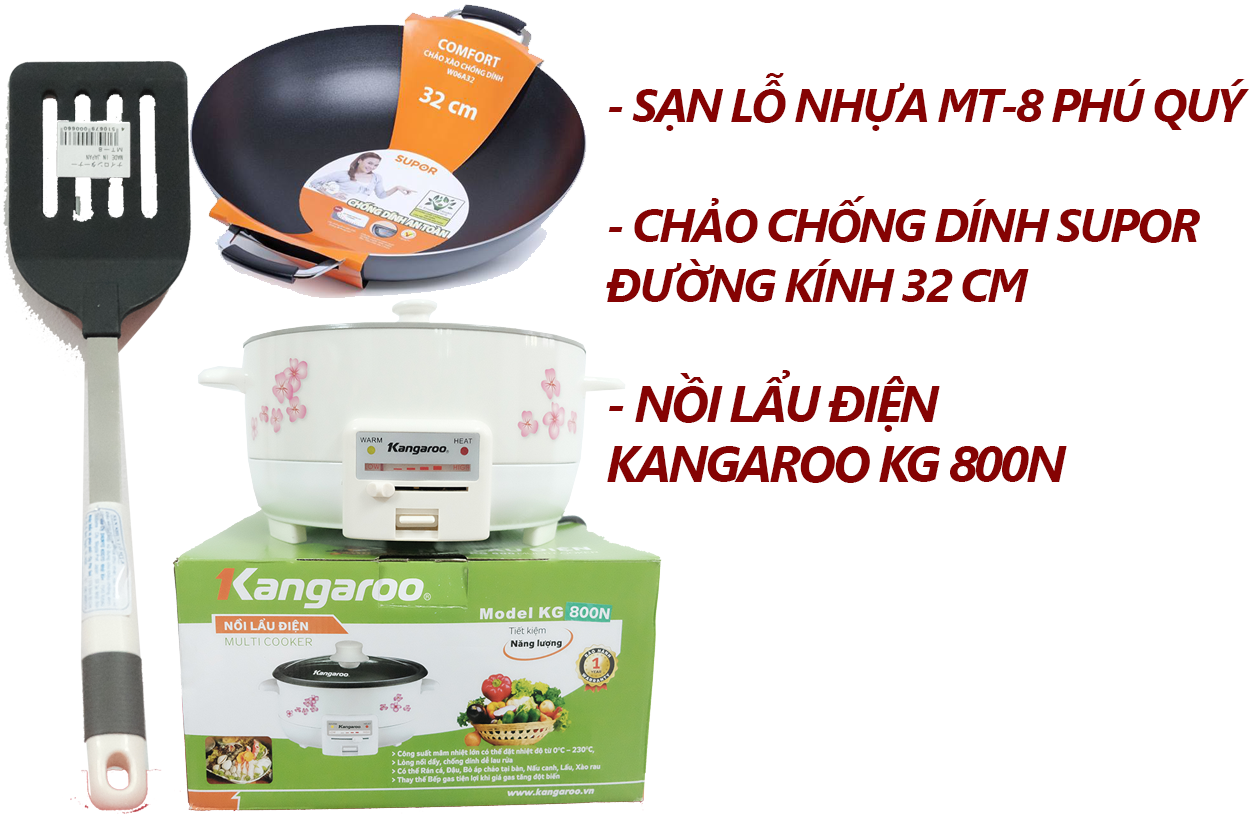
<style>
.page{position:relative;width:1258px;height:814px;background:#ffffff}
.page>*{position:absolute;margin:0}
.t1{font:47px/60px "SegoeUI-BoldItalic";letter-spacing:-0.06em;color:#850303;text-transform:uppercase}
.t2{font:50px/60px "SegoeUI-BoldItalic";letter-spacing:-0.06em;color:#850303;text-transform:uppercase}
</style>
<div class="page">
<p class="t1" style="left:606px;top:73px;width:643px;height:410px">- Sạn Lỗ Nhựa MT-8 Phú Quý <br><br>- CHẢO CHỐNG DÍNH SUPOR <br>đường kính 32 cm <br><br><span class="t2">- NỒI LẨU ĐIỆN <br>KANGAROO KG 800N</span></p>
</div>
